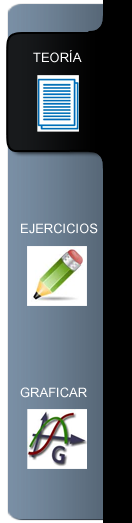
<style>
.page{position:relative;width:132px;height:523px;background:#000000}
.page>*{position:absolute;margin:0}
.t1{font:13px "ArialMT";color:#ffffff}
</style>
<div class="page">
<p class="t1" style="left:33px;top:50px;width:49px;height:13px">TEORÍA</p>
<p class="t1" style="left:21px;top:223px;width:77px;height:11px">EJERCICIOS</p>
<p class="t1" style="left:20px;top:387px;width:67px;height:11px">GRAFICAR</p>
</div>
